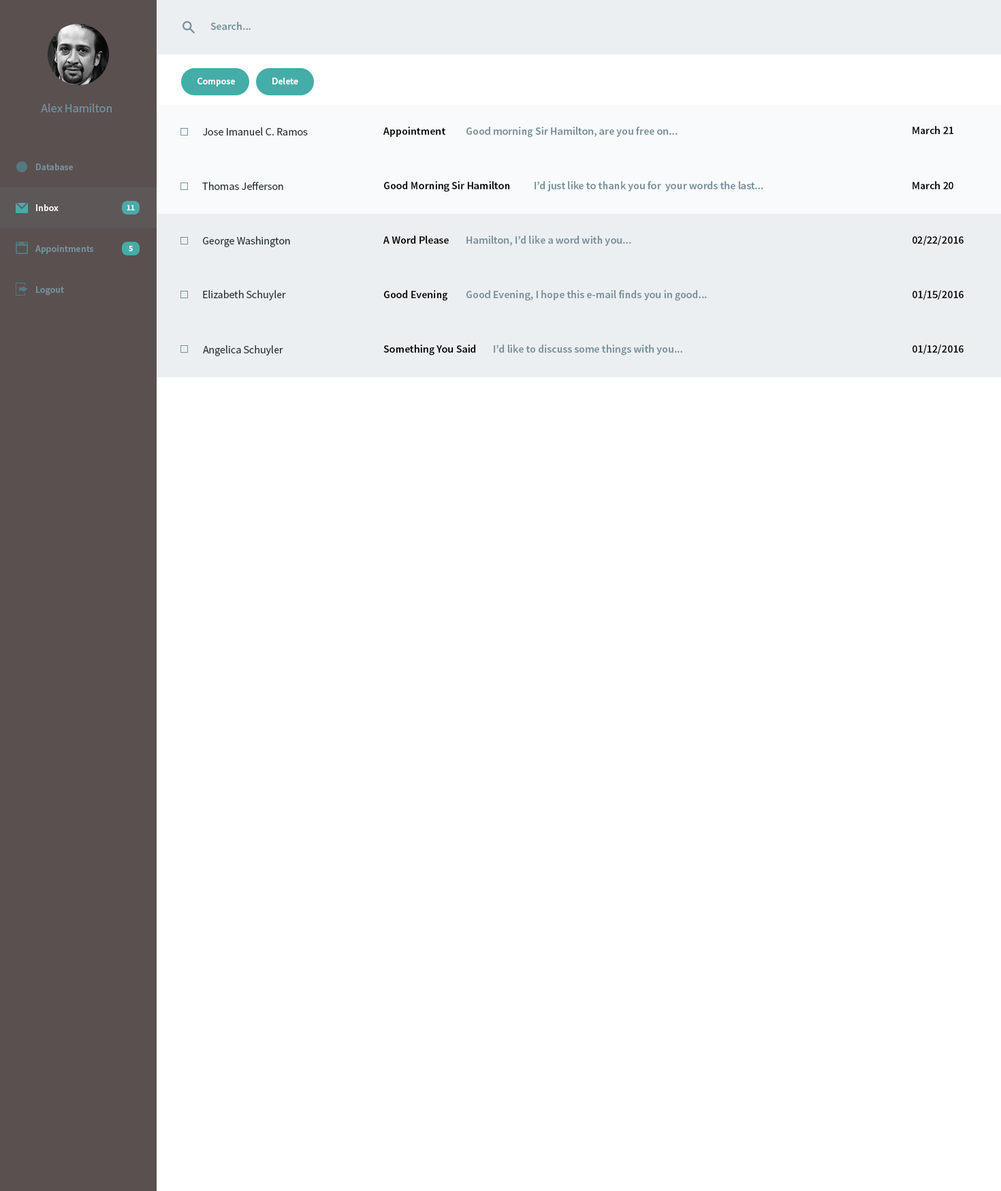
<style>
.page{position:relative;width:1001px;height:1191px;background:#ffffff}
.page>*{position:absolute;margin:0}
.t1{font:10.9px "SourceSansPro-Semibold";color:#78909c}
.t2{font:9.5px "SourceSansPro-Semibold";color:#ffffff}
.t3{font:12.3px "SourceSansPro-Regular";color:#78909c}
.t4{font:10.9px "SourceSansPro-Semibold";color:#000000}
.t5{font:11px "SourceSansPro-Regular";color:#263238}
.t6{font:9.5px "SourceSansPro-Semibold";color:#78909c}
.t7{font:8.2px "SourceSansPro-Bold";color:#f8fafb}
</style>
<div class="page">
<p class="t1" style="left:210px;top:22px;width:41px;height:8px">Search...</p>
<p class="t2" style="left:197px;top:78px;width:38px;height:8px">Compose</p>
<p class="t2" style="left:272px;top:78px;width:26px;height:6px">Delete</p>
<p class="t3" style="left:41px;top:104px;width:71px;height:8px">Alex Hamilton</p>
<p class="t4" style="left:913px;top:126px;width:41px;height:8px">March 21</p>
<p class="t5" style="left:203px;top:127px;width:105px;height:9px">Jose Imanuel C. Ramos</p>
<p class="t4" style="left:383px;top:127px;width:63px;height:10px">Appointment</p>
<p class="t1" style="left:466px;top:127px;width:212px;height:11px">Good morning Sir Hamilton, are you free on...</p>
<p class="t6" style="left:36px;top:163px;width:37px;height:7px">Database</p>
<p class="t5" style="left:202px;top:182px;width:81px;height:8px">Thomas Jefferson</p>
<p class="t4" style="left:383px;top:181px;width:127px;height:11px">Good Morning Sir Hamilton</p>
<p class="t1" style="left:535px;top:181px;width:228px;height:10px">I’d just like to thank you for  your words the last...</p>
<p class="t4" style="left:913px;top:181px;width:40px;height:8px">March 20</p>
<p class="t2" style="left:36px;top:204px;width:23px;height:7px">Inbox</p>
<p class="t7" style="left:127px;top:205px;width:8px;height:5px">11</p>
<p class="t6" style="left:35px;top:245px;width:58px;height:9px">Appointments</p>
<p class="t7" style="left:129px;top:246px;width:4px;height:5px">5</p>
<p class="t5" style="left:203px;top:236px;width:87px;height:11px">George Washington</p>
<p class="t4" style="left:383px;top:236px;width:66px;height:8px">A Word Please</p>
<p class="t1" style="left:467px;top:236px;width:164px;height:10px">Hamilton, I’d like a word with you...</p>
<p class="t4" style="left:913px;top:236px;width:51px;height:10px">02/22/2016</p>
<p class="t6" style="left:36px;top:286px;width:28px;height:10px">Logout</p>
<p class="t5" style="left:203px;top:290px;width:83px;height:10px">Elizabeth Schuyler</p>
<p class="t4" style="left:383px;top:290px;width:64px;height:11px">Good Evening</p>
<p class="t1" style="left:466px;top:290px;width:241px;height:11px">Good Evening, I hope this e-mail finds you in good...</p>
<p class="t4" style="left:913px;top:290px;width:51px;height:10px">01/15/2016</p>
<p class="t5" style="left:203px;top:345px;width:80px;height:11px">Angelica Schuyler</p>
<p class="t4" style="left:383px;top:345px;width:93px;height:10px">Something You Said</p>
<p class="t1" style="left:494px;top:345px;width:188px;height:10px">I’d like to discuss some things with you...</p>
<p class="t4" style="left:913px;top:345px;width:51px;height:10px">01/12/2016</p>
</div>
